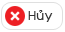
<style>
.page{position:relative;width:65px;height:32px;background:#ffffff}
.page>*{position:absolute;margin:0}
.t1{font:12px "VNI-Avo";color:#333333}
</style>
<div class="page">
<p class="t1" style="left:28px;top:10px;width:25px;height:12px">Huûy</p>
</div>
